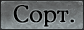
<style>
.page{position:relative;width:84px;height:30px}
.page>*{position:absolute;margin:0}
.t1{font:23px "CooperLightCBT";letter-spacing:0.01em;color:#000000;font-weight:bold}
</style>
<div class="page">
<p class="t1" style="left:13px;top:5px;width:61px;height:22px">Сорт.</p>
</div>
